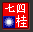
<style>
.page{position:relative;width:33px;height:32px;background:#f20000}
.page>*{position:absolute;margin:0}
.t1{font:10.4px "SimSun";color:#ffffff}
.t2{font:11.7px "SimSun";color:#ffffff}
</style>
<div class="page">
<p class="t1" style="left:5px;top:4px;width:20px;height:9px">七四</p>
<p class="t2" style="left:16px;top:15px;width:11px;height:12px">桂</p>
</div>
